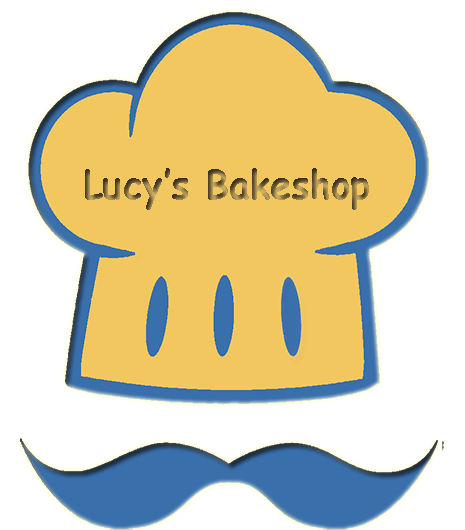
<style>
.page{position:relative;width:465px;height:530px;background:#ffffff}
.page>*{position:absolute;margin:0}
.t1{font:39.8px "ComicSansMS-Bold";scale:0.94 1}
</style>
<div class="page">
<p class="t1" style="left:85px;top:168px;width:284px;height:42px">Lucy’s Bakeshop</p>
</div>
